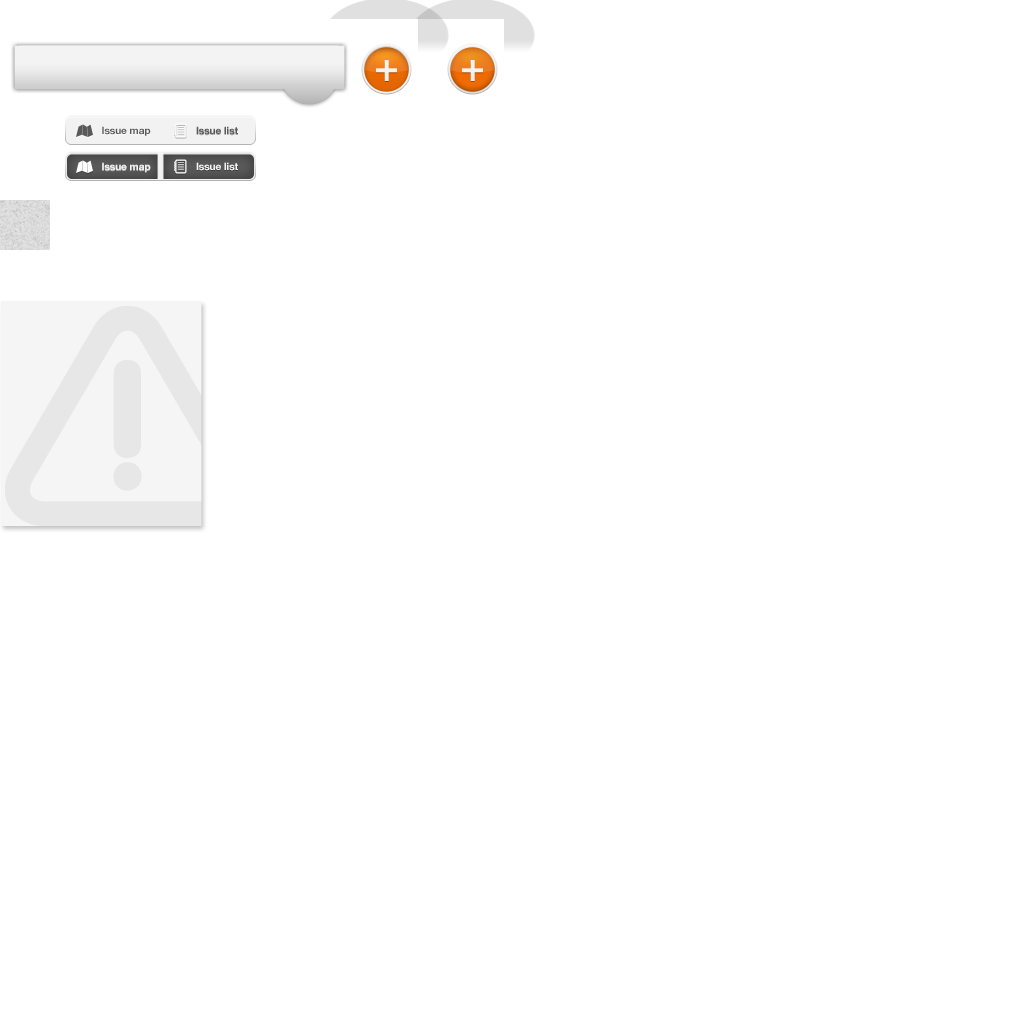
<style>
.page{position:relative;width:1024px;height:1024px;background:#ffffff}
.page>*{position:absolute;margin:0}
.t1{font:10px "HelveticaNeue-Bold";color:#595959}
.t2{font:10px "HelveticaNeue-Bold";color:#f3f3f3}
</style>
<div class="page">
<p class="t1" style="left:102px;top:126px;width:49px;height:10px">Issue map</p>
<p class="t1" style="left:196px;top:126px;width:42px;height:9px">Issue list</p>
<p class="t2" style="left:102px;top:162px;width:49px;height:10px">Issue map</p>
<p class="t2" style="left:196px;top:162px;width:42px;height:9px">Issue list</p>
</div>
